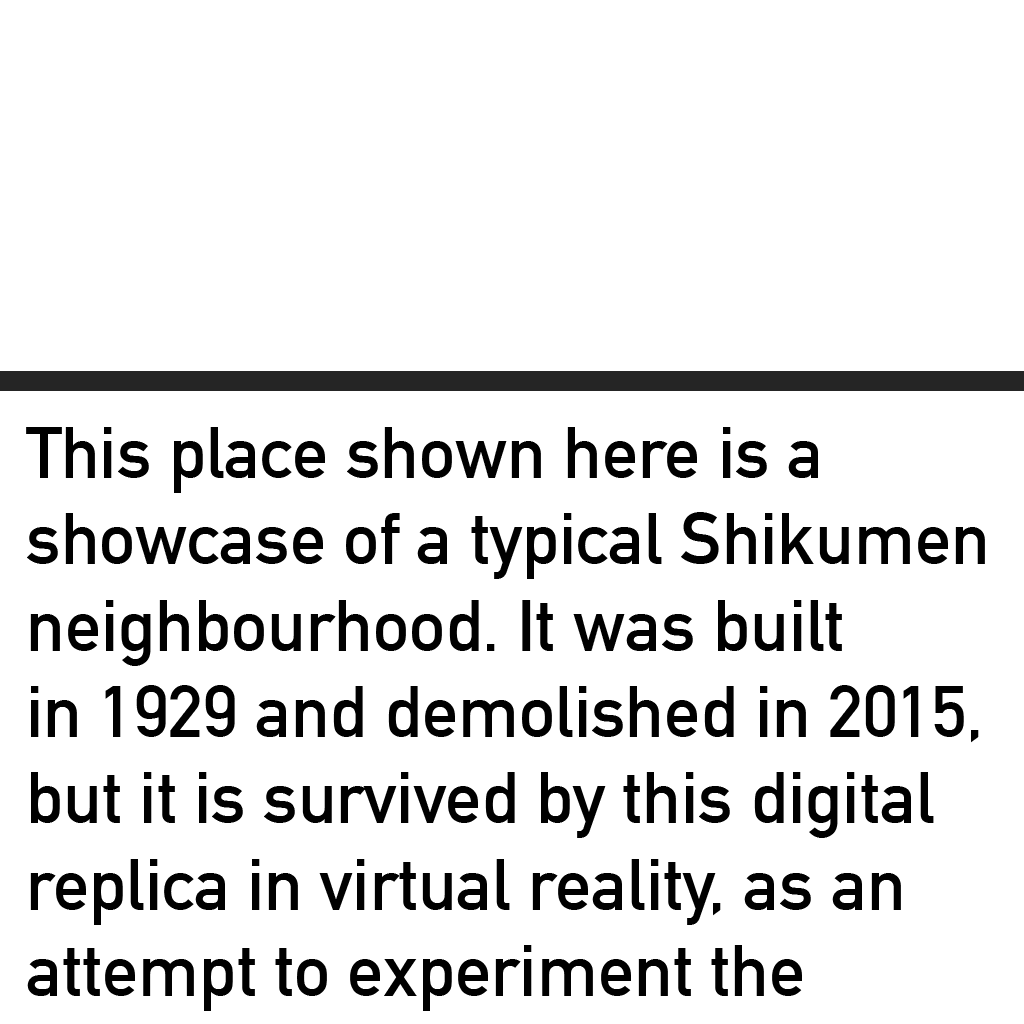
<style>
.page{position:relative;width:1024px;height:1024px;background:#ffffff}
.page>*{position:absolute;margin:0}
.t1{font:72px "DINAlternate-Bold";color:#000000}
</style>
<div class="page">
<p class="t1" style="left:26px;top:427px;width:959px;height:584px">This place shown here is a <br>showcase of a typical Shikumen<br>neighbourhood. It was built<br>in 1929 and demolished in 2015, <br>but it is survived by this digital <br>replica in virtual reality, as an <br>attempt to experiment the</p>
</div>
